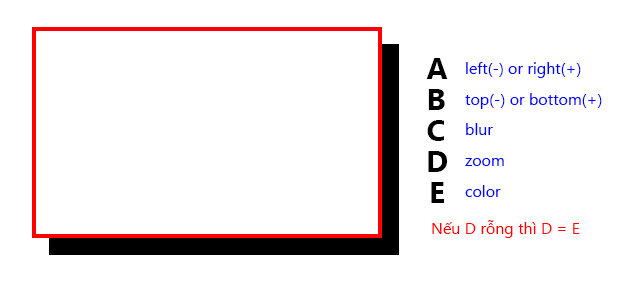
<style>
.page{position:relative;width:626px;height:282px;background:#ffffff}
.page>*{position:absolute;margin:0}
.t1{font:30px "SegoeUI-Bold";color:#000000}
.t2{font:16px "SegoeUI";color:#0000ff}
.t3{font:16px "SegoeUI";color:#ff0000}
</style>
<div class="page">
<p class="t1" style="left:426px;top:58px;width:22px;height:21px">A</p>
<p class="t2" style="left:466px;top:62px;width:115px;height:16px">left(-) or right(+)</p>
<p class="t1" style="left:428px;top:89px;width:17px;height:21px">B</p>
<p class="t2" style="left:465px;top:93px;width:137px;height:16px">top(-) or bottom(+)</p>
<p class="t1" style="left:427px;top:120px;width:17px;height:21px">C</p>
<p class="t2" style="left:466px;top:123px;width:27px;height:12px">blur</p>
<p class="t1" style="left:428px;top:151px;width:19px;height:21px">D</p>
<p class="t2" style="left:465px;top:158px;width:39px;height:8px">zoom</p>
<p class="t1" style="left:431px;top:182px;width:13px;height:21px">E</p>
<p class="t2" style="left:465px;top:185px;width:36px;height:12px">color</p>
<p class="t3" style="left:432px;top:220px;width:148px;height:18px">Nếu D rỗng thì D = E</p>
</div>
